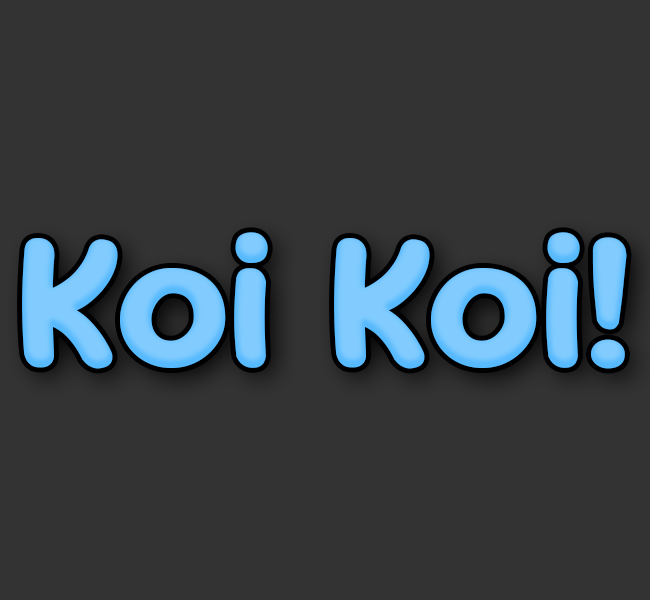
<style>
.page{position:relative;width:650px;height:600px;background:#333333}
.page>*{position:absolute;margin:0}
.t1{font:200px "SourGummy-Bold";color:#7fcafe}
</style>
<div class="page">
<p class="t1" style="left:22px;top:232px;width:605px;height:137px">Koi Koi!</p>
</div>
